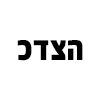
<style>
.page{position:relative;width:100px;height:100px;background:#ffffff}
.page>*{position:absolute;margin:0}
.t1{font:41.3px "FbAlbatros-Black";color:#000000;scale:0.8 1}
</style>
<div class="page">
<p class="t1" style="left:17px;top:40px;width:66px;height:21px">הצדכ</p>
</div>
